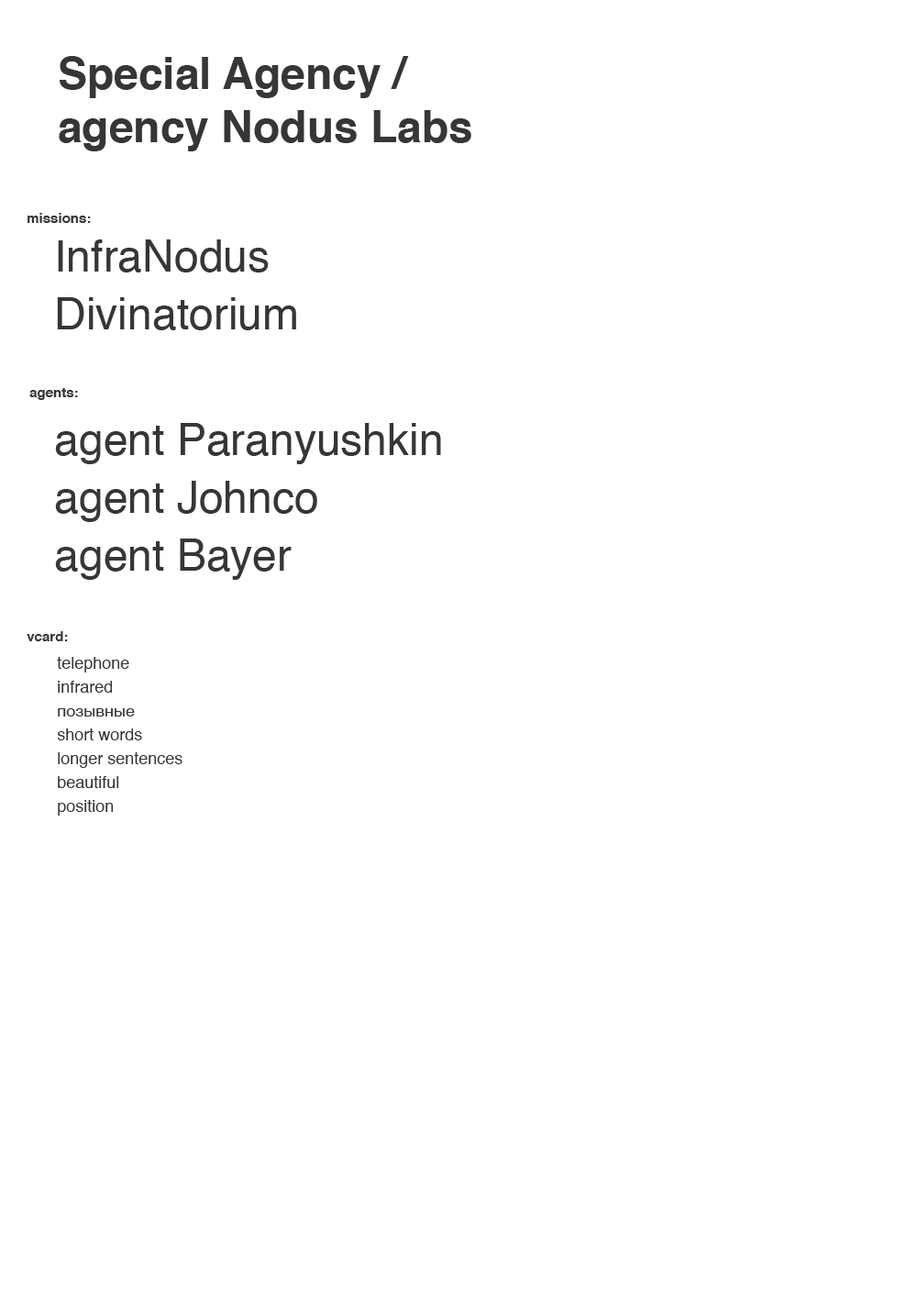
<style>
.page{position:relative;width:917px;height:1300px;background:#ffffff}
.page>*{position:absolute;margin:0}
.t1{font:44px "Helvetica-Bold";color:#363636}
.t2{font:13.8px "Helvetica-Bold";color:#363636}
.t3{font:44px/57.8px "Helvetica";color:#363636}
.t4{font:16.5px/23.9px "Helvetica";color:#363636}
</style>
<div class="page">
<p class="t1" style="left:59px;top:56px;width:413px;height:95px">Special Agency /<br>agency Nodus Labs</p>
<p class="t2" style="left:28px;top:213px;width:63px;height:10px">missions:</p>
<p class="t3" style="left:57px;top:239px;width:239px;height:91px">InfraNodus<br>Divinatorium</p>
<p class="t2" style="left:29px;top:388px;width:49px;height:12px">agents:</p>
<p class="t3" style="left:55px;top:423px;width:386px;height:157px">agent Paranyushkin<br>agent Johnco<br>agent Bayer</p>
<p class="t2" style="left:27px;top:631px;width:41px;height:10px">vcard:</p>
<p class="t4" style="left:57px;top:657px;width:126px;height:159px">telephone<br>infrared<br>позывные<br>short words<br>longer sentences<br>beautiful<br>position</p>
</div>
